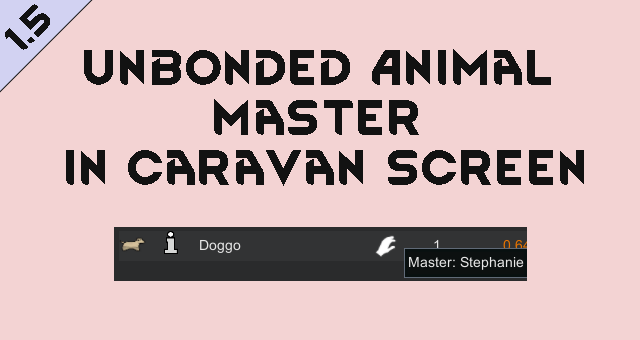
<style>
.page{position:relative;width:640px;height:340px;background:#f3d3d3}
.page>*{position:absolute;margin:0}
.t1{font:41.7px "RimWordFont";color:#121212}
</style>
<div class="page">
<p class="t1" style="left:66px;top:49px;width:518px;height:137px;text-align:center">Unbonded Animal Master<br> in caravan screen</p>
</div>
